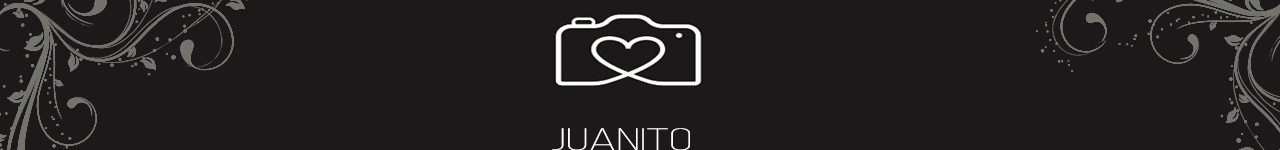
<style>
.page{position:relative;width:1280px;height:150px;background:#1b1919}
.page>*{position:absolute;margin:0}
.t1{font:31px "BebasNeueLight";color:#ffffff;scale:2.01 1}
</style>
<div class="page">
<p class="t1" style="left:552px;top:128px;width:138px;height:23px">juanito</p>
</div>
